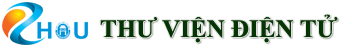
<style>
.page{position:relative;width:350px;height:50px;background:#ffffff}
.page>*{position:absolute;margin:0}
.t1{font:25px "TimesNewRomanPS-BoldMT";color:#073404}
</style>
<div class="page">
<p class="t1" style="left:100px;top:14px;width:238px;height:29px">THƯ VIỆN ĐIỆN TỬ</p>
</div>
